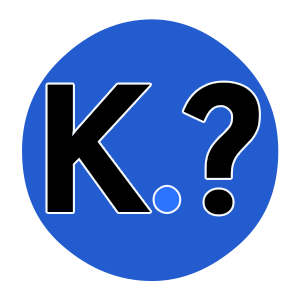
<style>
.page{position:relative;width:300px;height:300px;background:#225cce}
.page>*{position:absolute;margin:0}
.t1{font:1804.2px "JosefinSans-Bold";color:#225cce}
.t2{font:173.2px "JosefinSans-Bold";color:#000000}
.t3{font:173.2px "JosefinSans-Bold";color:#2c73ff}
</style>
<div class="page">
<p class="t1" style="left:22px;top:19px;width:257px;height:262px">.</p>
<p class="t2" style="left:47px;top:82px;width:212px;height:133px">K<span class="t3">.</span>?</p>
</div>
